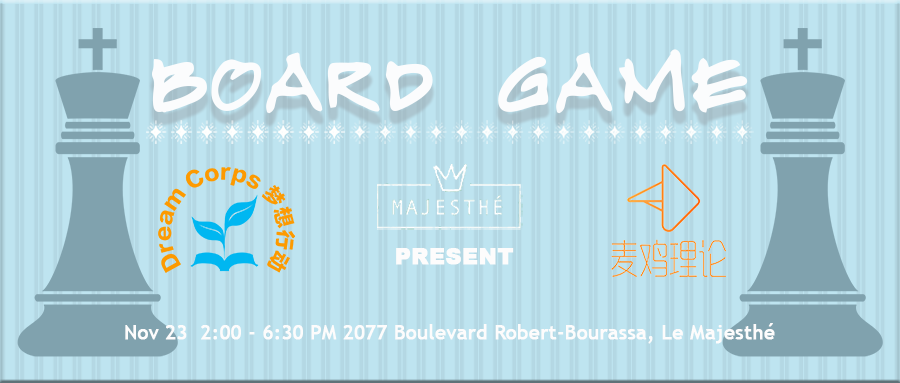
<style>
.page{position:relative;width:900px;height:383px;background:#bee4f0}
.page>*{position:absolute;margin:0}
.t1{font:120px "LongCang-Regular";color:#fbfcfd;font-weight:bold}
.t2{font:22px "Arial-Black";color:#fdfcfc;font-weight:bold}
.t3{font:20px "TrebuchetMS";color:#fdfcfc;font-weight:bold}
</style>
<div class="page">
<p class="t1" style="left:152px;top:49px;width:596px;height:65px">BOARD GAME</p>
<p class="t2" style="left:396px;top:248px;width:118px;height:17px">PRESENT</p>
<p class="t3" style="left:125px;top:323px;width:650px;height:21px">Nov 23  2:00 - 6:30 PM 2077 Boulevard Robert-Bourassa, Le Majesthé</p>
</div>
